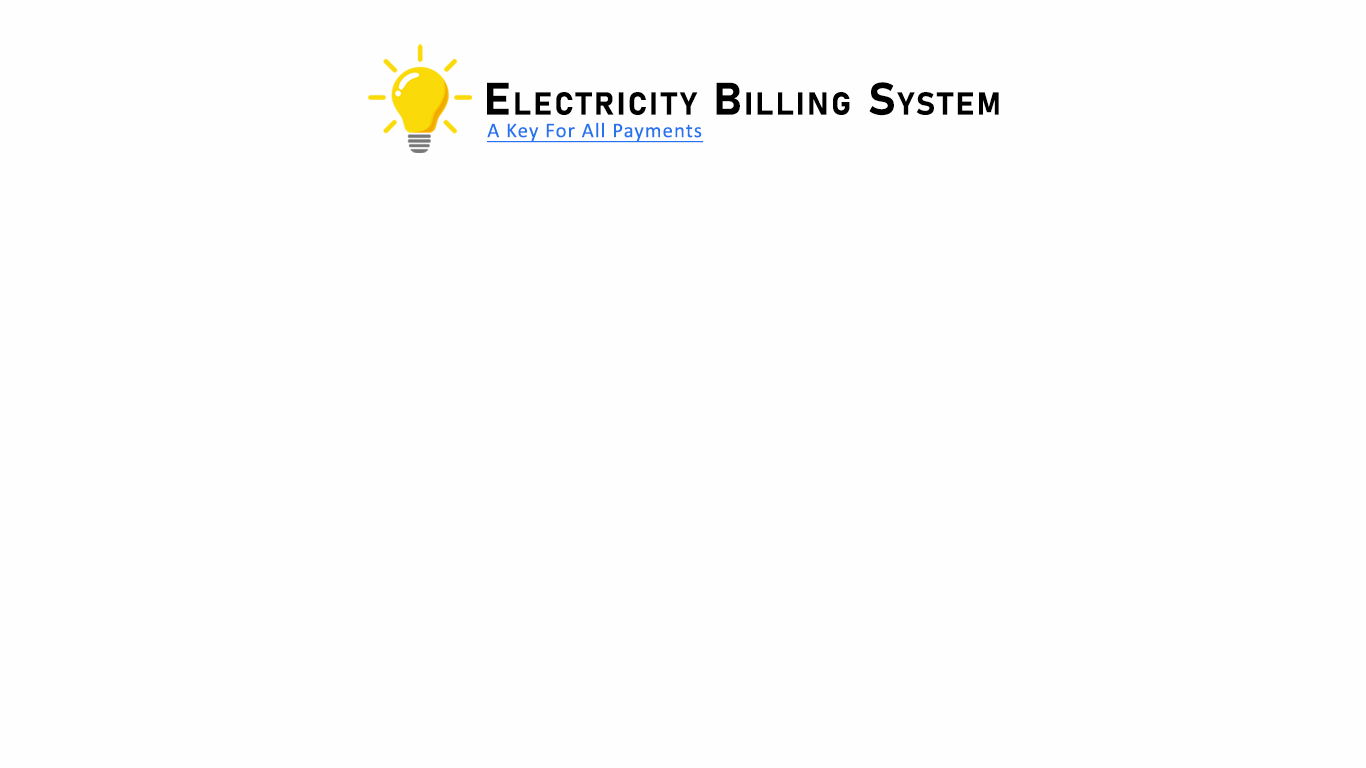
<style>
.page{position:relative;width:1366px;height:768px;background:#fffefe}
.page>*{position:absolute;margin:0}
.t1{font:45px "Bahnschrift-Bold";letter-spacing:0.05em;color:#000000;font-variant:small-caps}
.t2{font:20.9px "Calibri";letter-spacing:0.05em;color:#2473ef;text-decoration:underline}
</style>
<div class="page">
<p class="t1" style="left:487px;top:82px;width:512px;height:34px">Electricity Billing System</p>
<p class="t2" style="left:487px;top:122px;width:217px;height:21px">A Key For All Payments</p>
</div>
